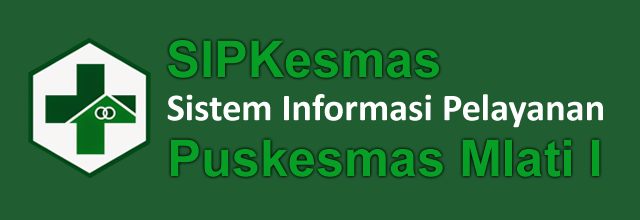
<style>
.page{position:relative;width:640px;height:220px;background:#205e32}
.page>*{position:absolute;margin:0}
.t1{font:50.5px "Arial-BoldMT";color:#079f26}
.t2{font:38.5px "Calibri-Bold";color:#ffffff}
</style>
<div class="page">
<p class="t1" style="left:168px;top:40px;width:271px;height:38px">SIPKesmas</p>
<p class="t2" style="left:167px;top:94px;width:436px;height:34px">Sistem Informasi Pelayanan</p>
<p class="t1" style="left:171px;top:139px;width:429px;height:38px">Puskesmas Mlati I</p>
</div>
